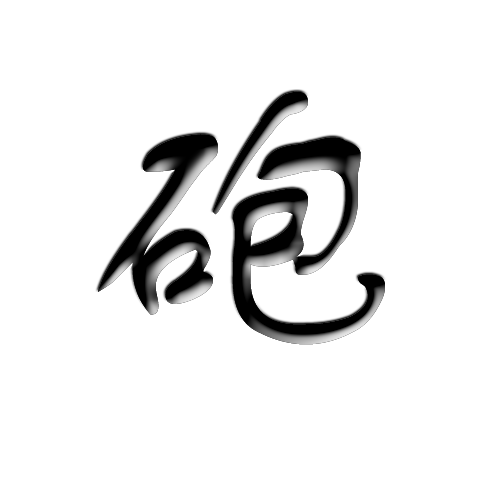
<style>
.page{position:relative;width:500px;height:500px;background:#ffffff}
.page>*{position:absolute;margin:0}
.t1{font:320px "FZSTK--GBK1-0"}
</style>
<div class="page">
<p class="t1" style="left:97px;top:91px;width:288px;height:254px">砲</p>
</div>
